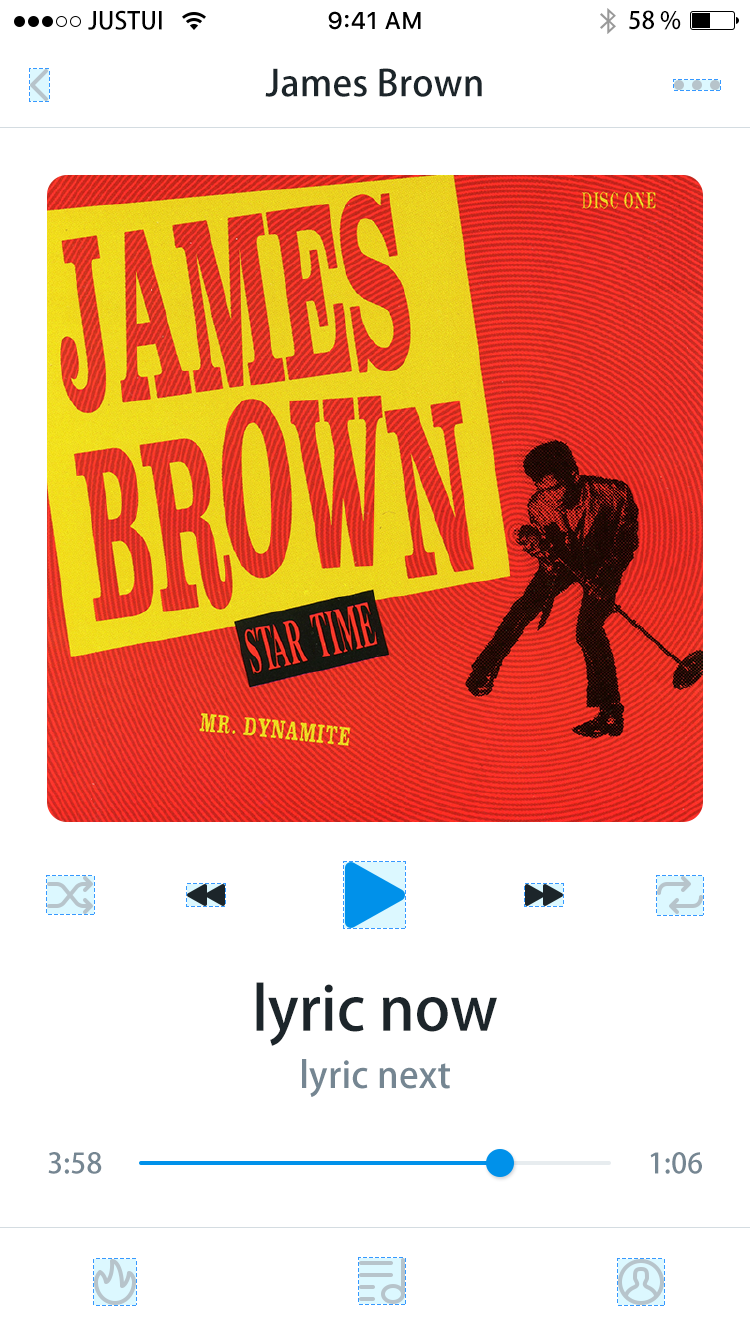
<style>
.page{position:relative;width:750px;height:1334px;background:#ffffff}
.page>*{position:absolute;margin:0}
.t1{font:24px "AdobeHeitiStd-Regular";color:#000000}
.t2{font:24px "SFUIText-Medium";color:#000000}
.t3{font:36px "AdobeHeitiStd-Regular";letter-spacing:0.008em;color:#1c252a}
.t4{font:60px "AdobeHeitiStd-Regular";color:#1c252a}
.t5{font:36px "AdobeHeitiStd-Regular";letter-spacing:0.008em;color:#758692}
.t6{font:28px "AdobeHeitiStd-Regular";letter-spacing:0.012em;color:#758692}
</style>
<div class="page">
<p class="t1" style="left:88px;top:10px;width:74px;height:20px">JUSTUI</p>
<p class="t2" style="left:328px;top:11px;width:93px;height:19px">9:41 AM</p>
<p class="t1" style="left:629px;top:10px;width:52px;height:20px">58 %</p>
<p class="t3" style="left:265px;top:68px;width:217px;height:29px">James Brown</p>
<p class="t4" style="left:256px;top:982px;width:241px;height:64px">lyric now</p>
<p class="t5" style="left:302px;top:1059px;width:148px;height:38px">lyric next</p>
<p class="t6" style="left:48px;top:1152px;width:54px;height:22px">3:58</p>
<p class="t6" style="left:650px;top:1152px;width:52px;height:22px">1:06</p>
</div>
